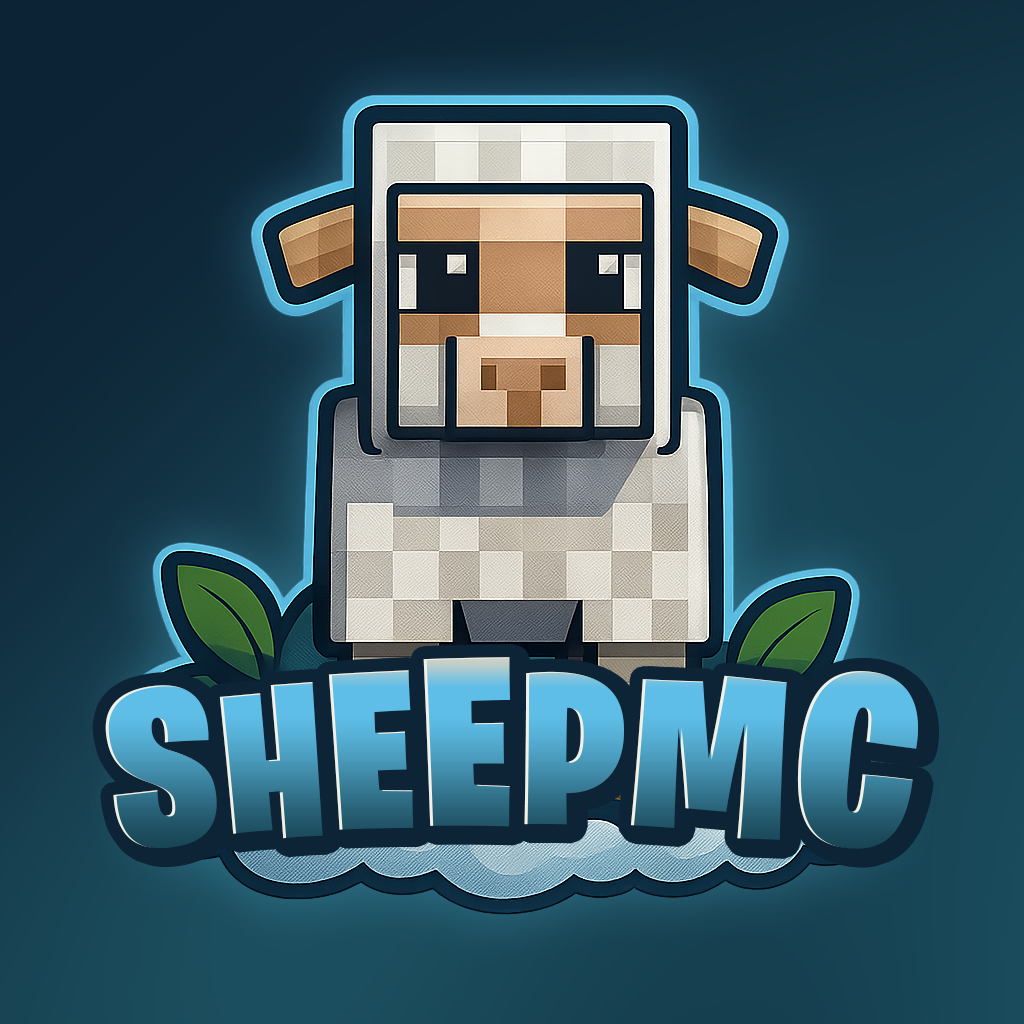
<style>
.page{position:relative;width:1024px;height:1024px}
.page>*{position:absolute;margin:0}
.t1{font:220px "BurbankBigCondensed-Black";letter-spacing:0.03em}
.t2{font:224.6px "BurbankBigCondensed-Black";letter-spacing:0.03em}
.t3{font:209.5px "BurbankBigCondensed-Black";letter-spacing:0.03em}
.t4{font:240.9px "BurbankBigCondensed-Black";letter-spacing:0.03em}
.t5{font:242.1px "BurbankBigCondensed-Black";letter-spacing:0.03em}
</style>
<div class="page">
<p class="t1" style="left:105px;top:657px;width:814px;height:192px"><span class="t2">S</span><span class="t3">H</span><span class="t2">E</span><span class="t4">E</span>PM<span class="t5">C</span></p>
</div>
